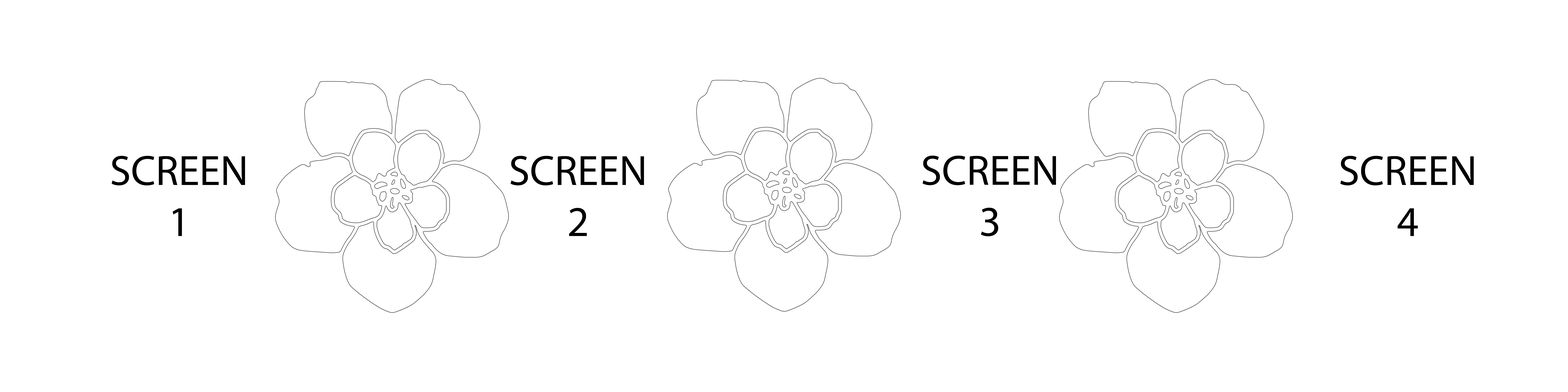
<style>
.page{position:relative;width:1568px;height:392px;background:#ffffff}
.page>*{position:absolute;margin:0}
.t1{font:42.5px "MyriadPro-Regular";color:#000000;text-transform:uppercase}
</style>
<div class="page">
<p class="t1" style="left:111px;top:156px;width:134px;height:80px;text-align:center">screen<br>1</p>
<p class="t1" style="left:510px;top:156px;width:134px;height:80px;text-align:center">screen<br>2</p>
<p class="t1" style="left:922px;top:156px;width:134px;height:80px;text-align:center">screen<br>3</p>
<p class="t1" style="left:1340px;top:156px;width:134px;height:80px;text-align:center">screen<br>4</p>
</div>
